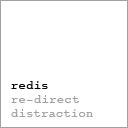
<style>
.page{position:relative;width:128px;height:128px;background:#ffffff}
.page>*{position:absolute;margin:0}
.t1{font:12.1px "Courier";letter-spacing:0.05em;color:#010101}
.t2{font:12.1px "Courier";letter-spacing:0.05em;color:#a1a1a1}
</style>
<div class="page">
<p class="t1" style="left:11px;top:81px;width:37px;height:8px">redis</p>
<p class="t2" style="left:11px;top:95px;width:82px;height:22px">re-direct <br>distraction</p>
</div>
